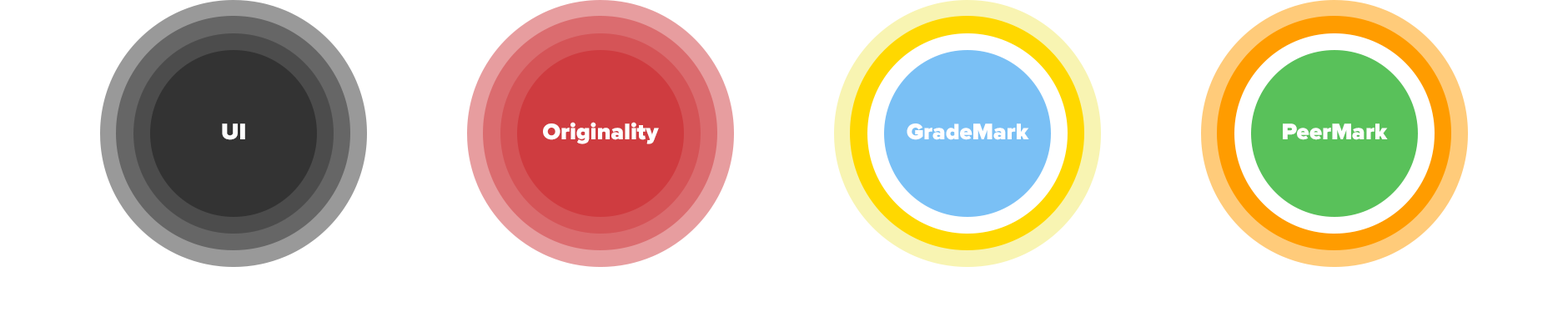
<style>
.page{position:relative;width:1568px;height:317px;background:#ffffff}
.page>*{position:absolute;margin:0}
.t1{font:23.4px "ProximaNova-Black";color:#ffffff}
</style>
<div class="page">
<p class="t1" style="left:222px;top:123px;width:23px;height:17px">UI</p>
<p class="t1" style="left:543px;top:122px;width:116px;height:22px">Originality</p>
<p class="t1" style="left:907px;top:123px;width:122px;height:17px">GradeMark</p>
<p class="t1" style="left:1283px;top:123px;width:105px;height:17px">PeerMark</p>
</div>
